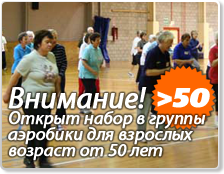
<style>
.page{position:relative;width:224px;height:174px}
.page>*{position:absolute;margin:0}
.t1{font:18px/16px "MyriadPro-It";color:#ffffff;font-weight:bold}
.t2{font:30px/30px "MyriadPro-It";color:#ffffff;font-weight:bold}
.t3{font:26.8px "FreeSetBlackC-Italic";letter-spacing:-0.04em;color:#ffffff;font-weight:bold}
</style>
<div class="page">
<p class="t1" style="left:8px;top:87px;width:198px;height:74px"><span class="t2">Внимание! <br></span>Открыт набор в группы<br>аэробики для взрослых<br>возраст от 50 лет</p>
<p class="t3" style="left:157px;top:88px;width:53px;height:20px">&gt;50</p>
</div>
